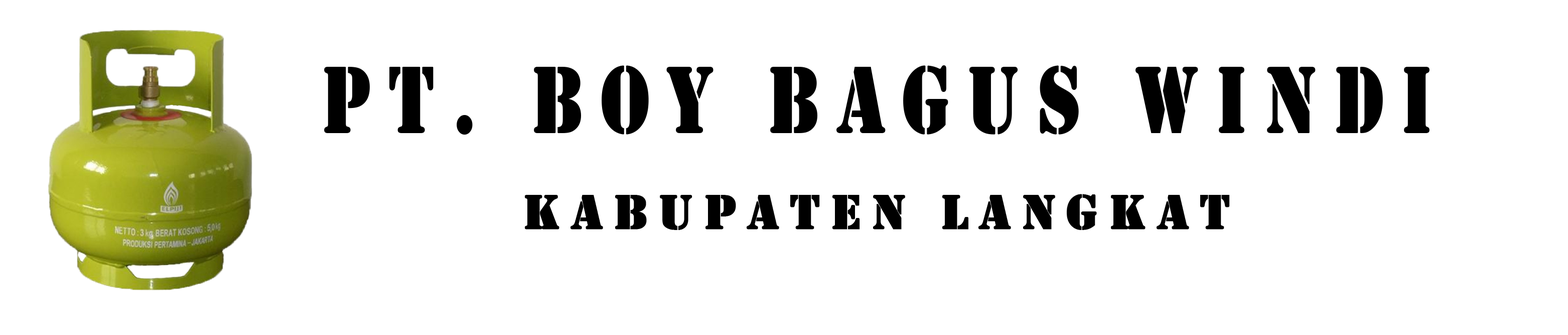
<style>
.page{position:relative;width:1568px;height:335px;background:#ffffff}
.page>*{position:absolute;margin:0}
.t1{font:97.8px "Stencil";letter-spacing:0.2em;color:#000000;font-weight:bold;scale:0.79 1}
.t2{font:50.2px "Stencil";letter-spacing:0.2em;color:#000000;font-weight:bold}
</style>
<div class="page">
<p class="t1" style="left:324px;top:65px;width:1106px;height:69px">PT. BOY Bagus WIndi</p>
<p class="t2" style="left:525px;top:194px;width:705px;height:36px">Kabupaten langkat</p>
</div>
